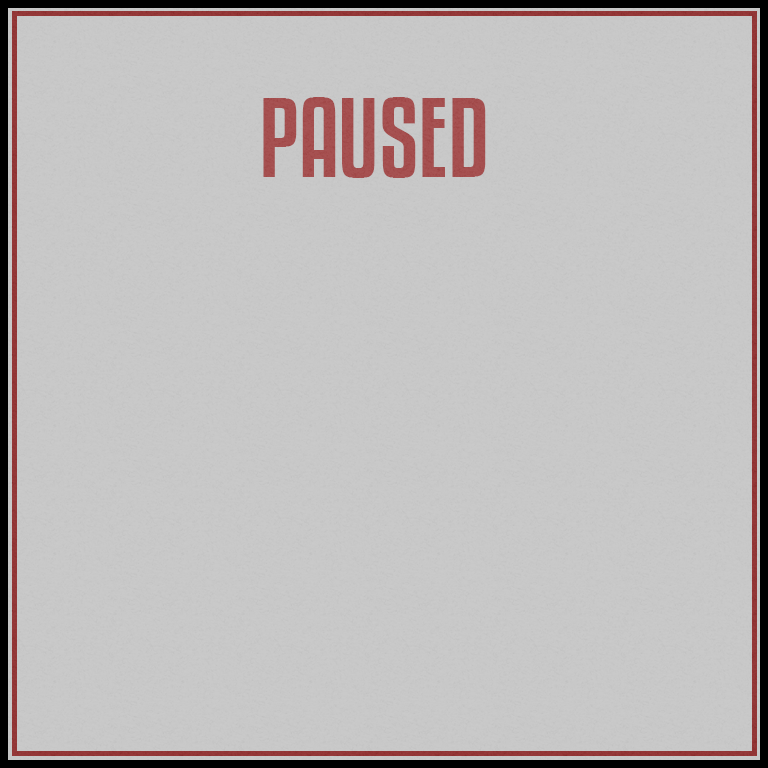
<style>
.page{position:relative;width:768px;height:768px;background:#c8c8c8}
.page>*{position:absolute;margin:0}
.t1{font:100px "KenyanCoffeeRg-Regular";color:#a54f4f}
</style>
<div class="page">
<p class="t1" style="left:263px;top:97px;width:223px;height:81px">PAUSED</p>
</div>
